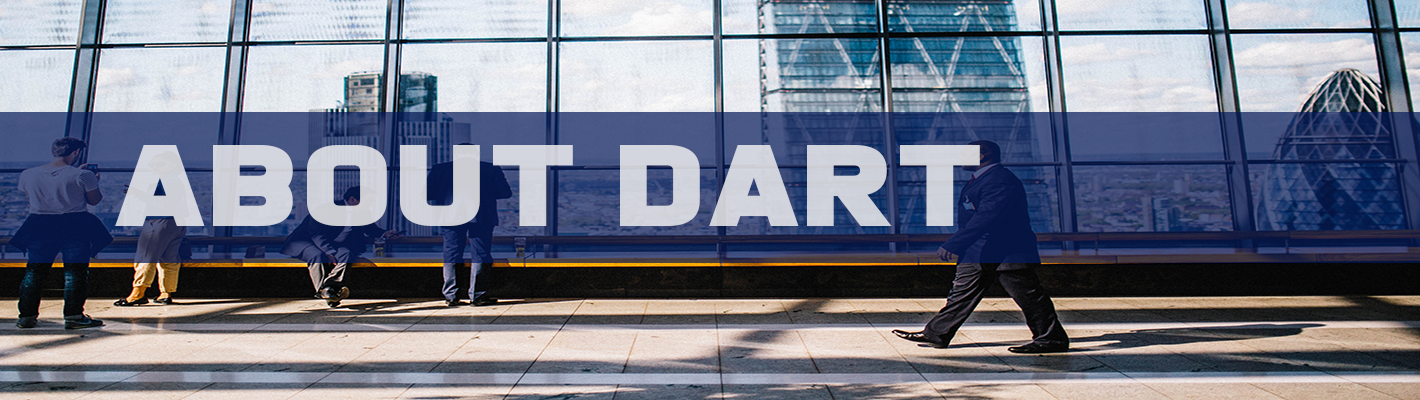
<style>
.page{position:relative;width:1420px;height:400px}
.page>*{position:absolute;margin:0}
.t1{font:103.4px "BoomerTantrum";color:#d0d3db;scale:1.32 1}
</style>
<div class="page">
<p class="t1" style="left:115px;top:145px;width:865px;height:81px">ABOUT DART</p>
</div>
